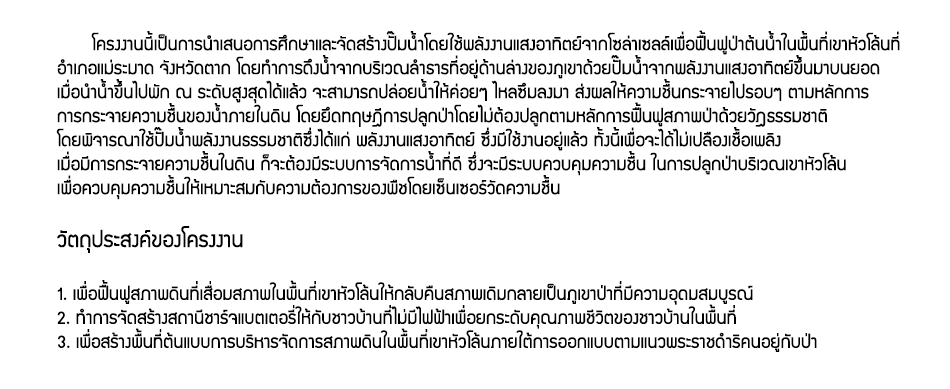
<style>
.page{position:relative;width:950px;height:389px;background:#ffffff}
.page>*{position:absolute;margin:0}
.t1{font:20px "supermarket";color:#000000}
.t2{font:18px "supermarket";color:#000000}
.t3{font:24px "supermarket";color:#000000}
</style>
<div class="page">
<p class="t1" style="left:56px;top:30px;width:844px;height:322px"><span class="t2">         </span>โครงงานนี้เป็นการนำเสนอการศึกษาและจัดสร้างปั๊มน้ำโดยใช้พลังงานแสงอาทิตย์จากโซล่าเซลล์เพื่อฟื้นฟูป่าต้นน้ำในพื้นที่เขาหัวโล้นที่<br>อำเภอแม่ระมาด จังหวัดตาก โดยทำการดึงน้ำจากบริเวณลำธารที่อยู่ด้านล่างของภูเขาด้วยปั๊มน้ำจากพลังงานแสงอาทิตย์ขึ้นมาบนยอด เมื่อนำน้ำขึ้นไปพัก ณ ระดับสูงสุดได้แล้ว จะสามารถปล่อยน้ำให้ค่อยๆ ไหลซึมลงมา ส่งผลให้ความชื้นกระจายไปรอบๆ ตามหลักการ <br>การกระจายความชื้นของน้ำภายในดิน โดยยึดทฤษฎีการปลูกป่าโดยไม่ต้องปลูกตามหลักการฟื้นฟูสภาพป่าด้วยวัฎธรรมชาติ โดยพิจารณาใช้ปั๊มน้ำพลังงานธรรมชาติซึ่งได้แก่ พลังงานแสงอาทิตย์ ซึ่งมีใช้งานอยู่แล้ว ทั้งนี้เพื่อจะได้ไม่เปลืองเชื้อเพลิง เมื่อมีการกระจายความชื้นในดิน ก็จะต้องมีระบบการจัดการน้ำที่ดี ซึ่งจะมีระบบควบคุมความชื้น ในการปลูกป่าบริเวณเขาหัวโล้น เพื่อควบคุมความชื้นให้เหมาะสมกับความต้องการของพืชโดยเซ็นเซอร์วัดความชื้น<br><br><span class="t3">วัตถุประสงค์ของโครงงาน<br><br></span>1. เพื่อฟื้นฟูสภาพดินที่เสื่อมสภาพในพื้นที่เขาหัวโล้นให้กลับคืนสภาพเดิมกลายเป็นภูเขาป่าที่มีความอุดมสมบูรณ์ <br>2. ทำการจัดสร้างสถานีชาร์จแบตเตอรี่ให้กับชาวบ้านที่ไม่มีไฟฟ้าเพื่อยกระดับคุณภาพชีวิตของชาวบ้านในพื้นที่<br>3. เพื่อสร้างพื้นที่ต้นแบบการบริหารจัดการสภาพดินในพื้นที่เขาหัวโล้นภายใต้การออกแบบตามแนวพระราชดำริคนอยู่กับป่า</p>
</div>
